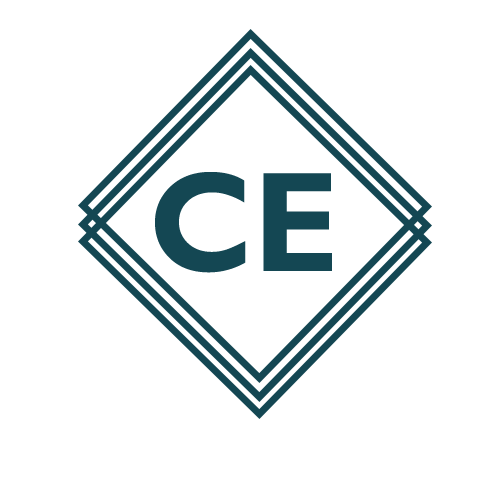
<style>
.page{position:relative;width:500px;height:500px;background:#ffffff}
.page>*{position:absolute;margin:0}
.t1{font:142.9px "GillSansMT-Bold";color:#144753;scale:0.95 1}
</style>
<div class="page">
<p class="t1" style="left:155px;top:172px;width:177px;height:101px">CE</p>
</div>
